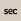
<style>
.page{position:relative;width:21px;height:21px;background:#d9cdc1}
.page>*{position:absolute;margin:0}
.t1{font:9px "Tahoma";color:#000000}
</style>
<div class="page">
<p class="t1" style="left:4px;top:8px;width:13px;height:7px">sec</p>
</div>
